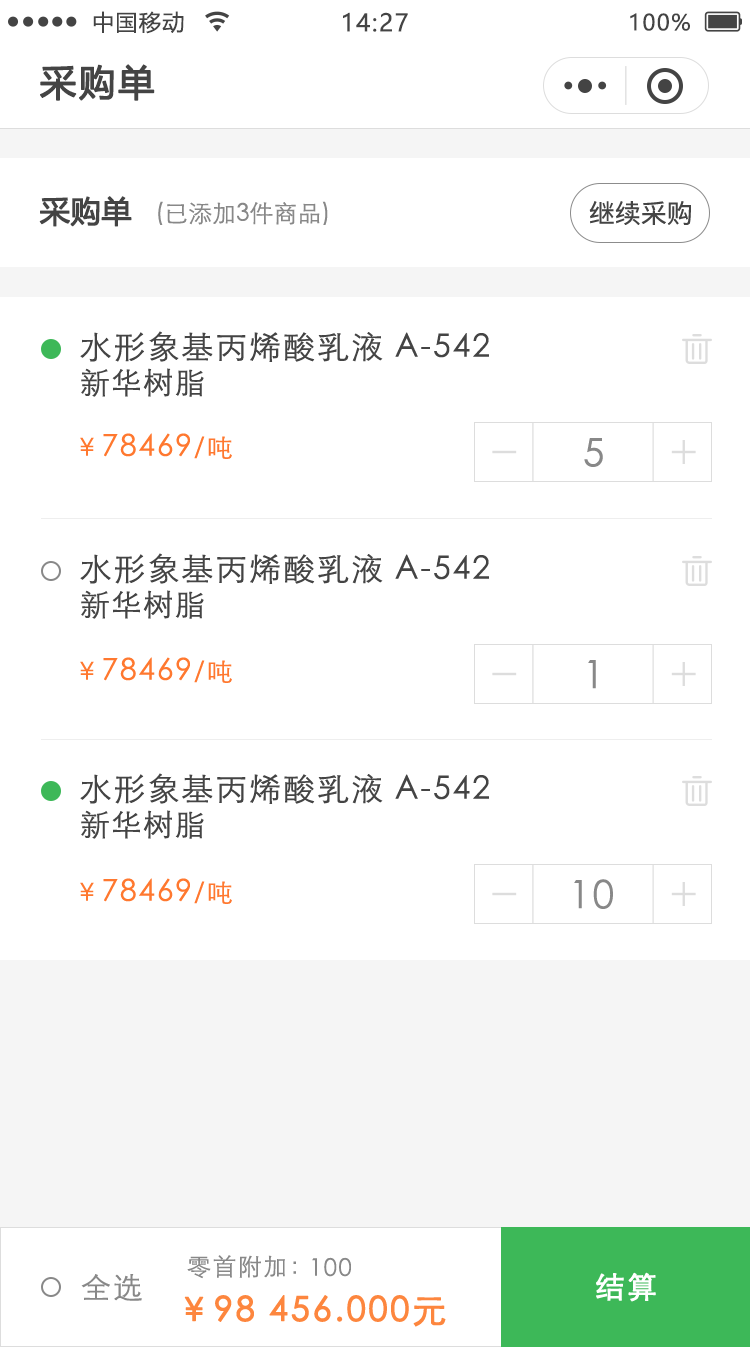
<style>
.page{position:relative;width:750px;height:1347px;background:#ffffff}
.page>*{position:absolute;margin:0}
.t1{font:22px "MicrosoftYaHei";letter-spacing:0.06em;color:#444444}
.t2{font:24px "MicrosoftYaHei";letter-spacing:0.06em;color:#444444}
.t3{font:36px "MicrosoftYaHei";letter-spacing:0.06em;color:#444444;font-weight:bold}
.t4{font:30px "MicrosoftYaHei";color:#444444;font-weight:bold}
.t5{font:24px "STXihei";color:#888888}
.t6{font:26px "NotoSansCJKsc-Regular";color:#444444}
.t7{font:32px "STXihei";letter-spacing:0.06em;color:#444444}
.t8{font:30px "STXihei";letter-spacing:0.06em;color:#444444}
.t9{font:30px "STXihei";letter-spacing:0.06em;color:#ff782f}
.t10{font:26px "STXihei";letter-spacing:0.06em;color:#ff782f}
.t11{font:39px "STXihei";letter-spacing:0.06em;color:#888888}
.t12{font:24px "STXihei";letter-spacing:0.06em;color:#888888}
.t13{font:30px "STXihei";letter-spacing:0.06em;color:#888888}
.t14{font:29.9px "STXihei";letter-spacing:0.06em;color:#ffffff;font-weight:bold}
.t15{font:34px "STXihei";letter-spacing:0.06em;color:#fd863e;font-weight:bold}
</style>
<div class="page">
<p class="t1" style="left:93px;top:11px;width:91px;height:23px">中国移动</p>
<p class="t2" style="left:343px;top:12px;width:65px;height:20px">14:27</p>
<p class="t1" style="left:630px;top:13px;width:60px;height:18px">100%</p>
<p class="t3" style="left:40px;top:64px;width:115px;height:37px">采购单</p>
<p class="t4" style="left:39px;top:196px;width:93px;height:31px">采购单</p>
<p class="t5" style="left:158px;top:201px;width:170px;height:24px">(已添加3件商品)</p>
<p class="t6" style="left:589px;top:201px;width:102px;height:24px">继续采购</p>
<p class="t7" style="left:80px;top:331px;width:409px;height:31px">水形象基丙烯酸乳液 A-542</p>
<p class="t8" style="left:81px;top:368px;width:123px;height:29px">新华树脂</p>
<p class="t9" style="left:80px;top:433px;width:152px;height:26px"><span class="t10">￥</span>78469<span class="t10">/吨</span></p>
<p class="t11" style="left:584px;top:438px;width:19px;height:29px">5</p>
<p class="t7" style="left:80px;top:553px;width:409px;height:31px">水形象基丙烯酸乳液 A-542</p>
<p class="t8" style="left:81px;top:590px;width:123px;height:29px">新华树脂</p>
<p class="t9" style="left:80px;top:657px;width:152px;height:26px"><span class="t10">￥</span>78469<span class="t10">/吨</span></p>
<p class="t11" style="left:588px;top:660px;width:8px;height:29px">1</p>
<p class="t7" style="left:80px;top:773px;width:409px;height:31px">水形象基丙烯酸乳液 A-542</p>
<p class="t8" style="left:81px;top:810px;width:123px;height:29px">新华树脂</p>
<p class="t9" style="left:80px;top:878px;width:152px;height:26px"><span class="t10">￥</span>78469<span class="t10">/吨</span></p>
<p class="t11" style="left:574px;top:879px;width:39px;height:30px">10</p>
<p class="t12" style="left:187px;top:1255px;width:109px;height:24px">零首附加：</p>
<p class="t12" style="left:312px;top:1257px;width:39px;height:20px">100</p>
<p class="t13" style="left:81px;top:1274px;width:61px;height:27px">全选</p>
<p class="t14" style="left:596px;top:1272px;width:60px;height:30px">结算</p>
<p class="t15" style="left:184px;top:1295px;width:262px;height:32px">￥98 456.000元</p>
</div>
